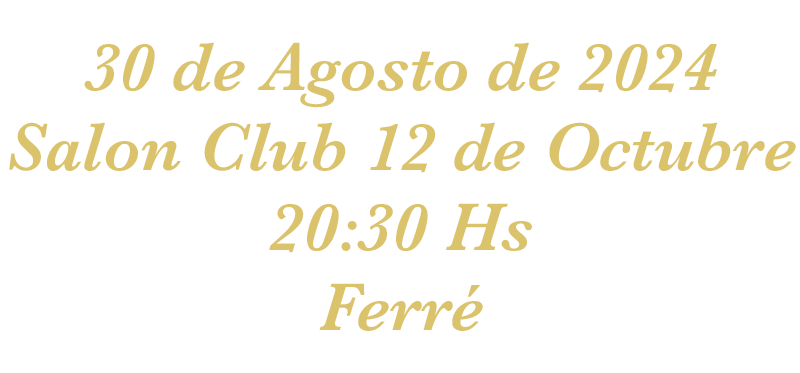
<style>
.page{position:relative;width:800px;height:373px;background:#ffffff}
.page>*{position:absolute;margin:0}
.t1{font:70px/80px "Baskerville-SemiBoldItalic";color:#dbc36c}
</style>
<div class="page">
<p class="t1" style="left:9px;top:42px;width:787px;height:289px;text-align:center">30 de Agosto de 2024<br>Salon Club 12 de Octubre<br>20:30 Hs<br>Ferré</p>
</div>
